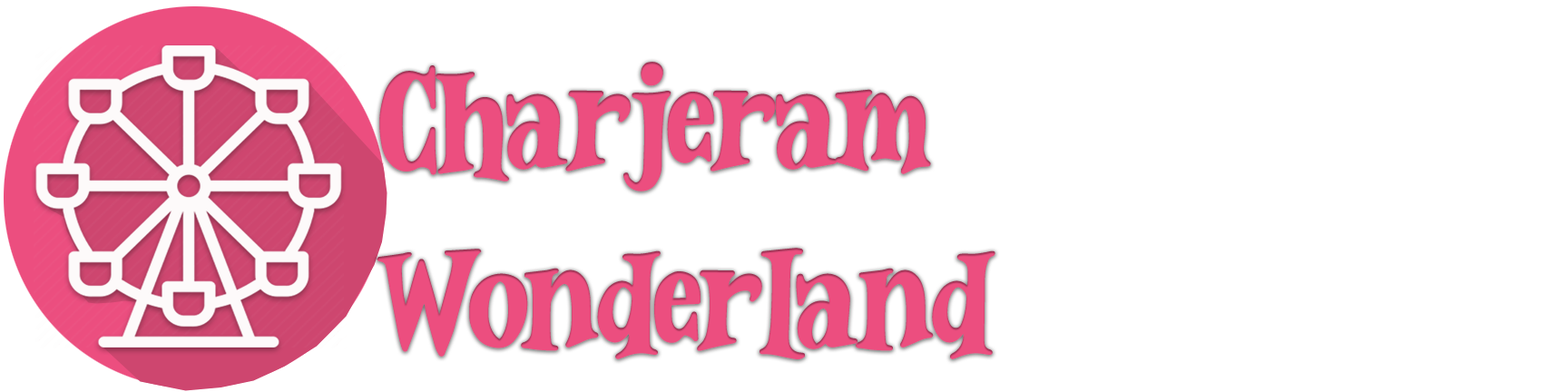
<style>
.page{position:relative;width:1568px;height:392px;background:#ffffff}
.page>*{position:absolute;margin:0}
.t1{font:149.7px "WonderMagicFreeTrial";color:#ec4e7f}
</style>
<div class="page">
<p class="t1" style="left:377px;top:62px;width:618px;height:297px;text-align:justify">Charjeram <br>Wonderland</p>
</div>
